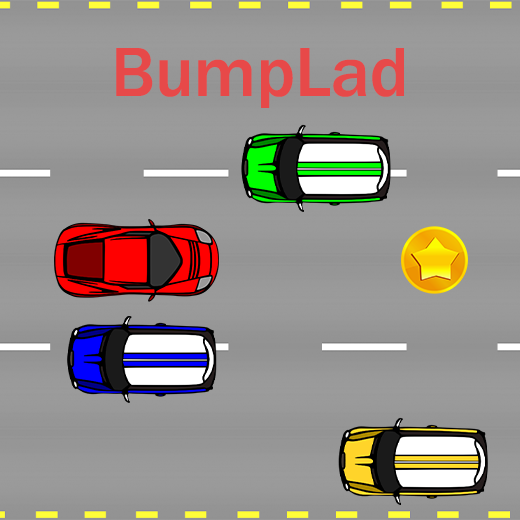
<style>
.page{position:relative;width:520px;height:520px}
.page>*{position:absolute;margin:0}
.t1{font:72px "FranklinGothic-Medium";color:#e74949}
</style>
<div class="page">
<p class="t1" style="left:116px;top:48px;width:288px;height:60px">BumpLad</p>
</div>
